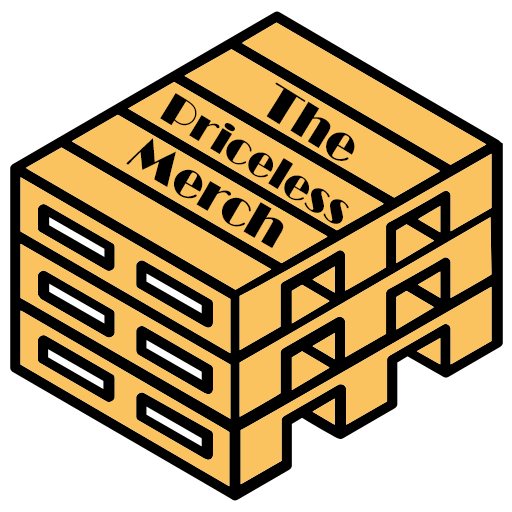
<style>
.page{position:relative;width:512px;height:512px;background:#ffffff}
.page>*{position:absolute;margin:0}
.t1{font:51px "Broadway";color:#000000}
.t2{font:44.6px "Broadway";color:#000000}
</style>
<div class="page">
<p class="t1" style="left:266px;top:82px;width:89px;height:79px;rotate:32deg">The</p>
<p class="t2" style="left:160px;top:93px;width:189px;height:131px;rotate:31deg">Priceless</p>
<p class="t1" style="left:126px;top:138px;width:158px;height:111px;rotate:30deg">Merch</p>
</div>
